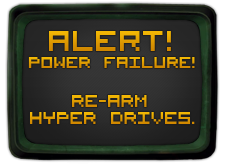
<style>
.page{position:relative;width:225px;height:165px}
.page>*{position:absolute;margin:0}
.t1{font:39.3px "VisitorTT1BRK"}
.t2{font:21px "VisitorTT1BRK"}
.t3{font:22.5px "VisitorTT1BRK"}
.t4{font:19.4px "VisitorTT1BRK"}
</style>
<div class="page">
<p class="t1" style="left:49px;top:31px;width:122px;height:20px">alert!</p>
<p class="t2" style="left:28px;top:57px;width:167px;height:11px">POWER FAILURE!</p>
<p class="t3" style="left:72px;top:95px;width:75px;height:12px">RE-ARM</p>
<p class="t3" style="left:30px;top:112px;width:165px;height:12px"><span class="t4"><br></span>HYPER DRIVES.</p>
</div>
